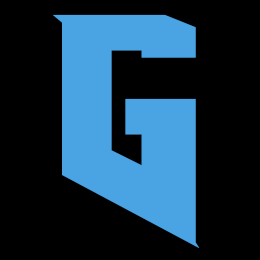
<style>
.page{position:relative;width:260px;height:260px;background:#000000}
.page>*{position:absolute;margin:0}
.t1{font:300px "AmazDooMRight2";letter-spacing:0.025em;color:#4aa3e2;text-transform:uppercase;scale:1.5 1}
</style>
<div class="page">
<p class="t1" style="left:53px;top:14px;width:147px;height:235px">G</p>
</div>
